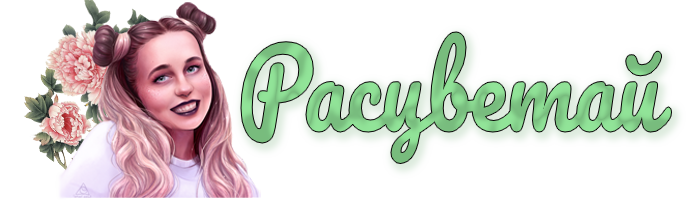
<style>
.page{position:relative;width:700px;height:200px;background:#ffffff}
.page>*{position:absolute;margin:0}
.t1{font:104.9px "Pacifico-Regular";color:#83ce8a;scale:0.87 1}
</style>
<div class="page">
<p class="t1" style="left:241px;top:32px;width:431px;height:131px">Расцветай</p>
</div>
